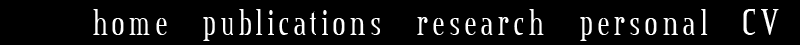
<style>
.page{position:relative;width:800px;height:45px;background:#000000}
.page>*{position:absolute;margin:0}
.t1{font:40px "CreditValley";letter-spacing:0.1em;color:#ffffff;scale:0.83 1}
</style>
<div class="page">
<p class="t1" style="left:93px;top:9px;width:686px;height:32px">home   publications   research   personal   CV</p>
</div>
